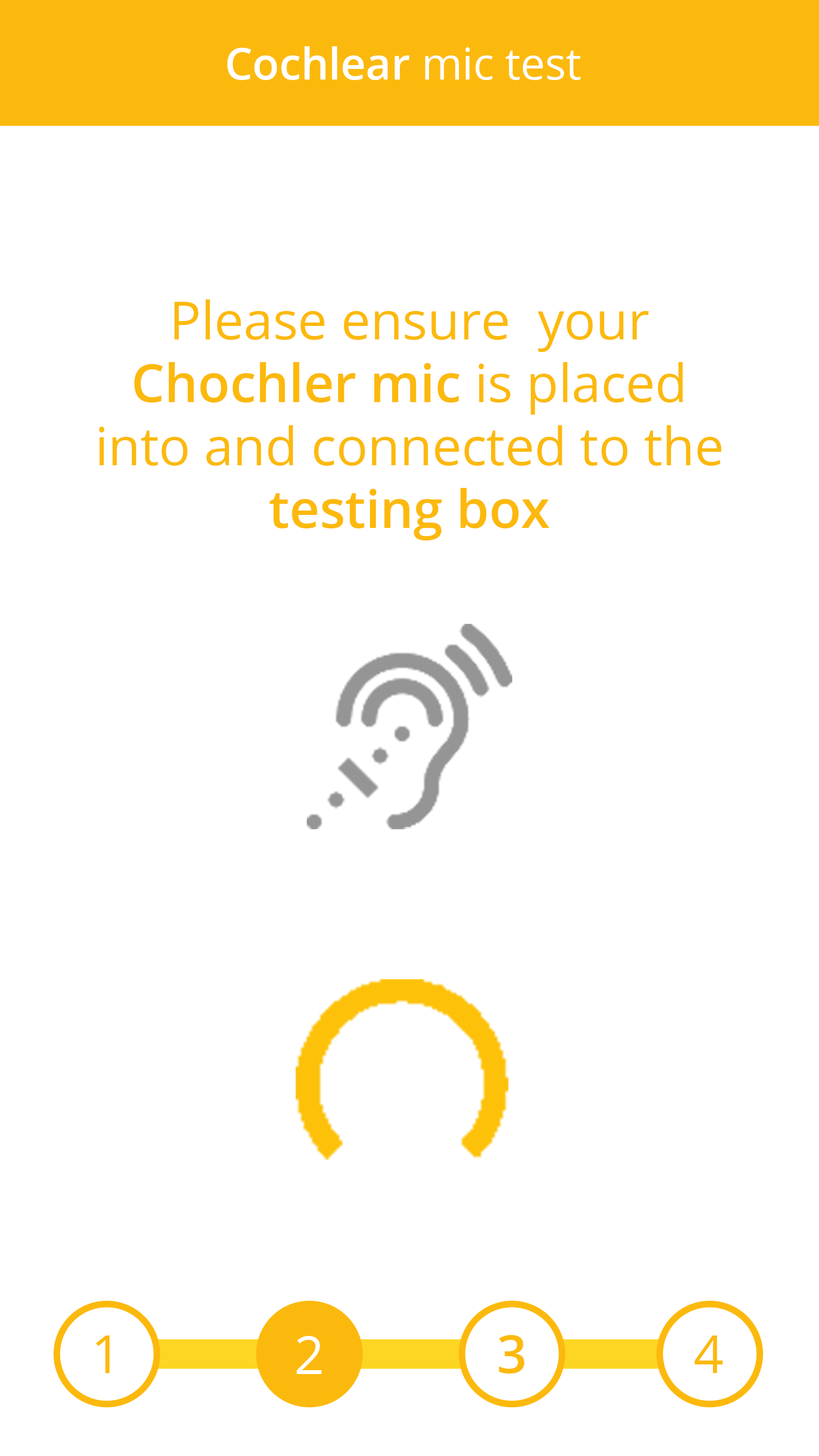
<style>
.page{position:relative;width:819px;height:1456px;background:#ffffff}
.page>*{position:absolute;margin:0}
.t1{font:43.7px "OpenSans-Semibold";color:#ffffff}
.t2{font:43.7px "OpenSans";color:#ffffff}
.t3{font:52.4px "OpenSans";color:#fcb90d}
.t4{font:52.4px "OpenSans-Semibold";color:#fcb90d}
.t5{font:52.4px "OpenSans";color:#ffffff}
</style>
<div class="page">
<p class="t1" style="left:227px;top:46px;width:354px;height:34px">Cochlear <span class="t2">mic test</span></p>
<p class="t3" style="left:99px;top:299px;width:622px;height:242px;text-align:center">Please ensure  your <span class="t4">Chochler mic</span> is placed into and connected to the <span class="t4">testing box</span></p>
<p class="t3" style="left:95px;top:1336px;width:15px;height:37px">1</p>
<p class="t5" style="left:297px;top:1336px;width:25px;height:38px">2</p>
<p class="t4" style="left:499px;top:1335px;width:25px;height:39px">3</p>
<p class="t3" style="left:694px;top:1336px;width:29px;height:37px">4</p>
</div>
